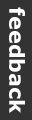
<style>
.page{position:relative;width:32px;height:120px;background:#333333}
.page>*{position:absolute;margin:0}
.t1{font:20.6px "Verdana-Bold";color:#ffffff}
</style>
<div class="page">
<p class="t1" style="left:9px;top:7px;width:16px;height:106px;rotate:90deg">feedback</p>
</div>
